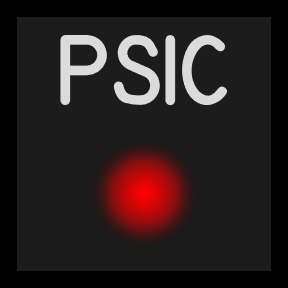
<style>
.page{position:relative;width:288px;height:288px;background:#1c1c1c}
.page>*{position:absolute;margin:0}
.t1{font:70px "MS-33558";letter-spacing:-0.04em;color:#e1e1e1}
</style>
<div class="page">
<p class="t1" style="left:60px;top:34px;width:169px;height:73px;opacity:0.97">PSIC</p>
</div>
